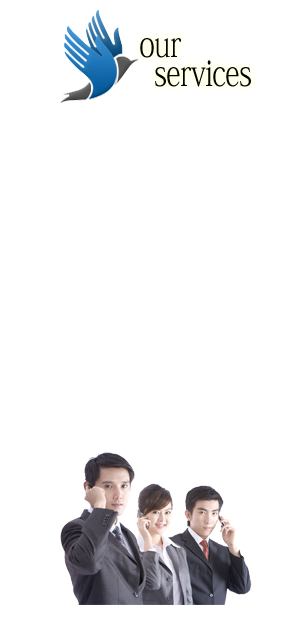
<style>
.page{position:relative;width:283px;height:625px;background:#ffffff}
.page>*{position:absolute;margin:0}
.t1{font:37.1px/28.9px "AdobeFangsongStd-Regular";letter-spacing:-0.025em;color:#030303;scale:0.79 1}
</style>
<div class="page">
<p class="t1" style="left:140px;top:38px;width:111px;height:49px">our <br>  services</p>
</div>
